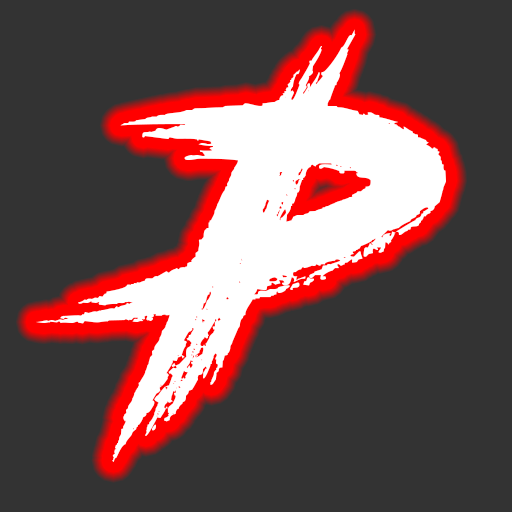
<style>
.page{position:relative;width:512px;height:512px;background:#333333}
.page>*{position:absolute;margin:0}
.t1{font:400px "RoadRage";color:#ffffff}
</style>
<div class="page">
<p class="t1" style="left:36px;top:29px;width:410px;height:433px">P</p>
</div>
